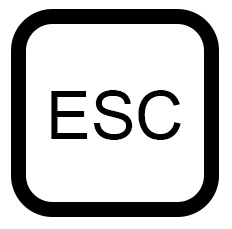
<style>
.page{position:relative;width:232px;height:229px;background:#ffffff}
.page>*{position:absolute;margin:0}
.t1{font:66.7px "ArialMT";color:#000000}
</style>
<div class="page">
<p class="t1" style="left:51px;top:90px;width:130px;height:50px">ESC</p>
</div>
